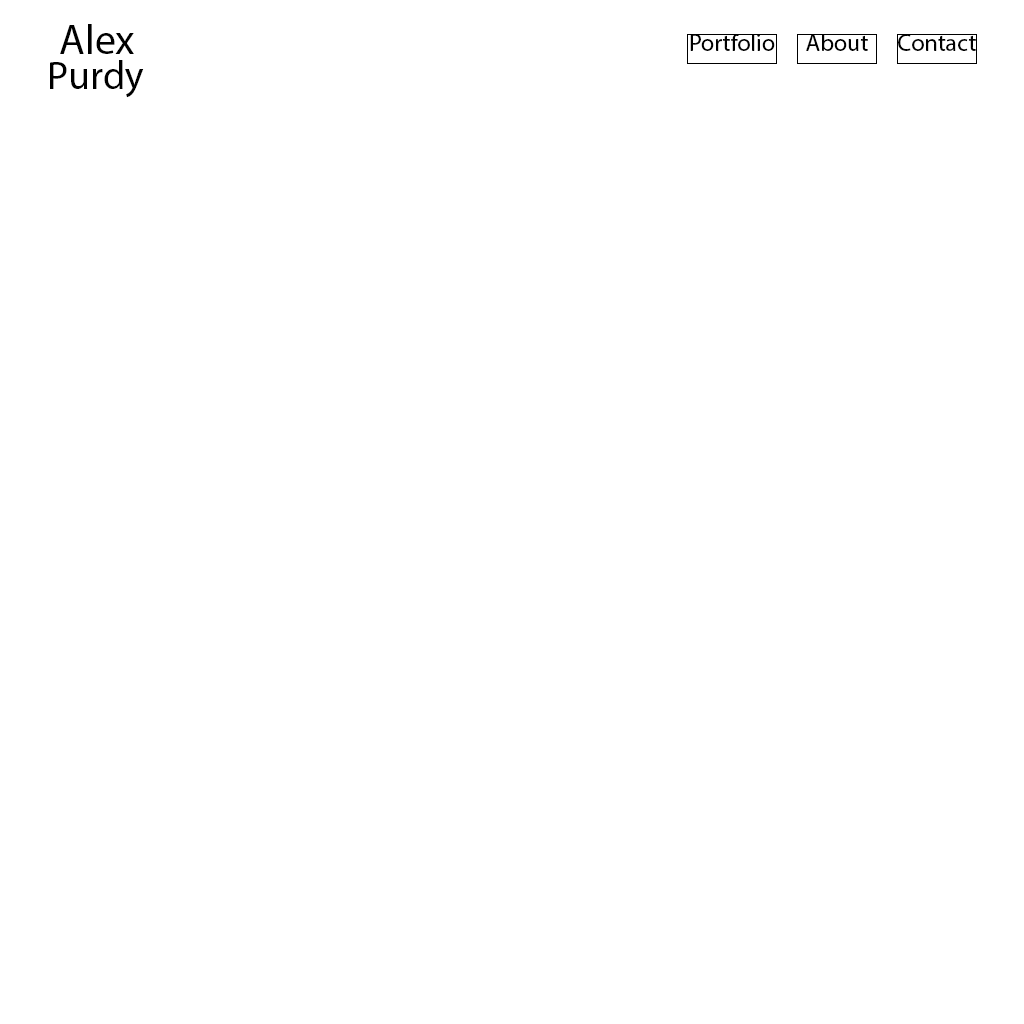
<style>
.page{position:relative;width:1024px;height:1024px;background:#ffffff}
.page>*{position:absolute;margin:0}
.t1{font:42px "MyriadPro-Regular";color:#000000}
.t2{font:24px "MyriadPro-Regular";color:#000000}
.t3{font:40px "MyriadPro-Regular";color:#000000}
</style>
<div class="page">
<p class="t1" style="left:60px;top:24px;width:74px;height:30px">Alex</p>
<p class="t2" style="left:690px;top:34px;width:85px;height:17px">Portfolio</p>
<p class="t2" style="left:806px;top:34px;width:62px;height:17px">About</p>
<p class="t2" style="left:898px;top:34px;width:78px;height:17px">Contact</p>
<p class="t3" style="left:50px;top:60px;width:94px;height:38px">Purdy</p>
</div>
